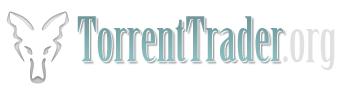
<style>
.page{position:relative;width:350px;height:90px;background:#ffffff}
.page>*{position:absolute;margin:0}
.t1{font:60px "BirchStd";color:#8cbec1}
.t2{font:60px "BirchStd"}
</style>
<div class="page">
<p class="t1" style="left:77px;top:16px;width:207px;height:46px">TorrentTrader</p>
<p class="t2" style="left:78px;top:17px;width:257px;height:54px">TorrentTrader.org</p>
<p class="t2" style="left:78px;top:17px;width:207px;height:46px">TorrentTrader</p>
</div>
